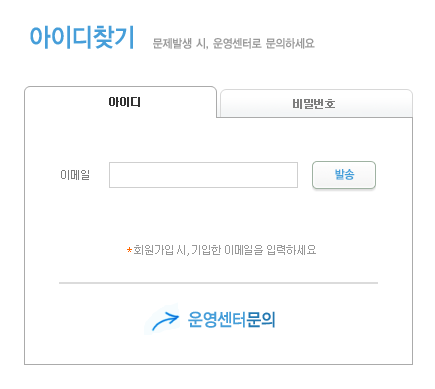
<style>
.page{position:relative;width:435px;height:389px;background:#ffffff}
.page>*{position:absolute;margin:0}
.t1{font:26px "YDIYGO140-KSCpc-EUC-H";letter-spacing:-0.1em;color:#469ed9;scale:0.9 1}
.t2{font:12px "YDIYGO140-KSCpc-EUC-H";letter-spacing:-0.1em;color:#999999;scale:0.9 1}
.t3{font:11px "Dotum";letter-spacing:-0.1em;color:#333333;font-weight:bold}
.t4{font:11px "Dotum";letter-spacing:-0.1em;color:#7d7d7d;font-weight:bold}
.t5{font:11px "Dotum";letter-spacing:-0.1em;color:#7d7d7d}
.t6{font:12px "YDIYGO140-KSCpc-EUC-H";letter-spacing:-0.1em;color:#469ed9;scale:0.9 1}
.t7{font:11px "Dotum";letter-spacing:-0.1em;color:#999999}
.t8{font:11px "Dotum";letter-spacing:-0.1em;color:#ff6600}
.t9{font:18px "YDIYGO140-KSCpc-EUC-H";letter-spacing:-0.1em;color:#469ed9;scale:0.9 1}
.t10{font:18px "YDIYGO140-KSCpc-EUC-H";letter-spacing:-0.1em;color:#2479b2;scale:0.9 1}
</style>
<div class="page">
<p class="t1" style="left:30px;top:25px;width:103px;height:24px">아이디찾기</p>
<p class="t2" style="left:153px;top:38px;width:162px;height:12px">문제발생 시, 운영센터로 문의하세요</p>
<p class="t3" style="left:109px;top:97px;width:31px;height:10px">아이디</p>
<p class="t4" style="left:293px;top:99px;width:42px;height:10px">비밀번호</p>
<p class="t5" style="left:61px;top:170px;width:28px;height:10px">이메일</p>
<p class="t6" style="left:335px;top:169px;width:20px;height:11px">발송</p>
<p class="t7" style="left:127px;top:245px;width:189px;height:11px"><span class="t8">*</span> 회원가입 시, 기입한 이메일을 입력하세요</p>
<p class="t9" style="left:188px;top:311px;width:87px;height:17px">운영센터<span class="t10">문의</span></p>
</div>
